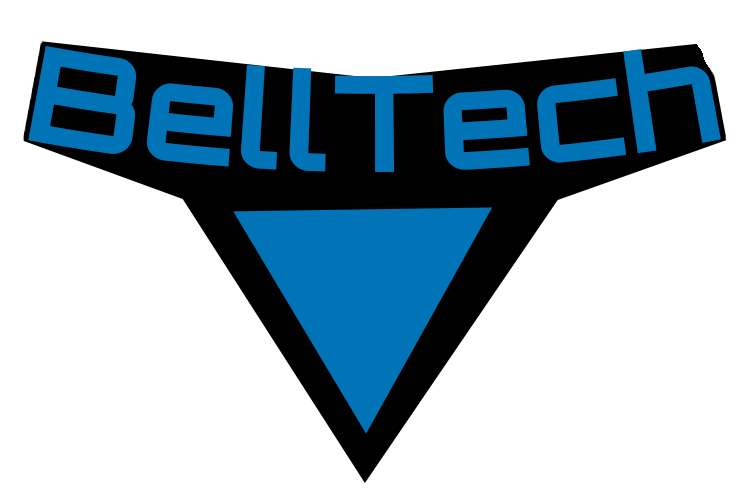
<style>
.page{position:relative;width:750px;height:500px;background:#ffffff}
.page>*{position:absolute;margin:0}
.t1{font:133.3px "Orbitron-Bold";color:#0074b7}
</style>
<div class="page">
<p class="t1" style="left:28px;top:46px;width:693px;height:126px">BellTech</p>
</div>
